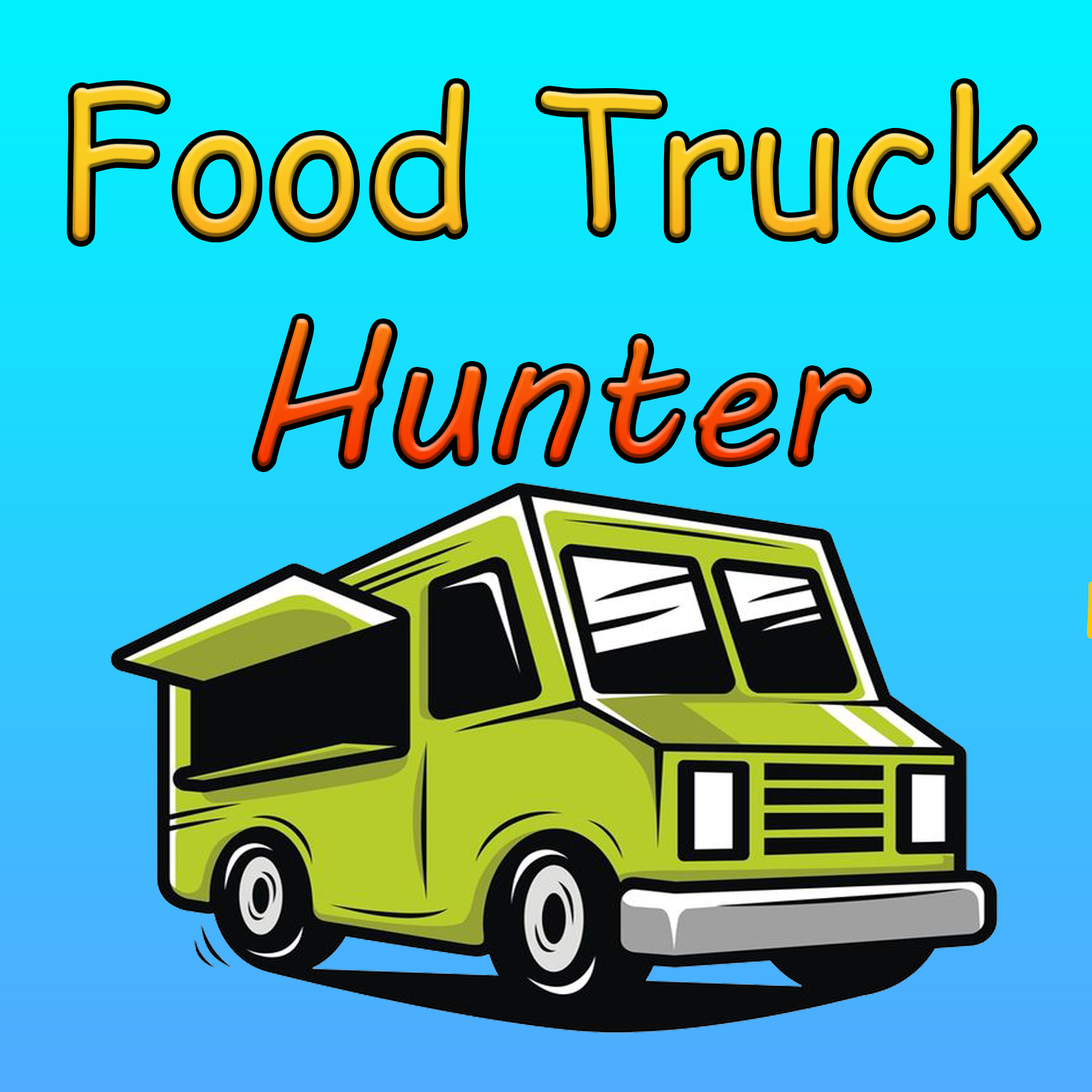
<style>
.page{position:relative;width:1092px;height:1092px}
.page>*{position:absolute;margin:0}
.t1{font:190.2px "ComicSansMS"}
.t2{font:190.2px "MVBoli"}
</style>
<div class="page">
<p class="t1" style="left:72px;top:83px;width:965px;height:384px;text-align:center">Food Truck<br><span class="t2">Hunter</span></p>
</div>
